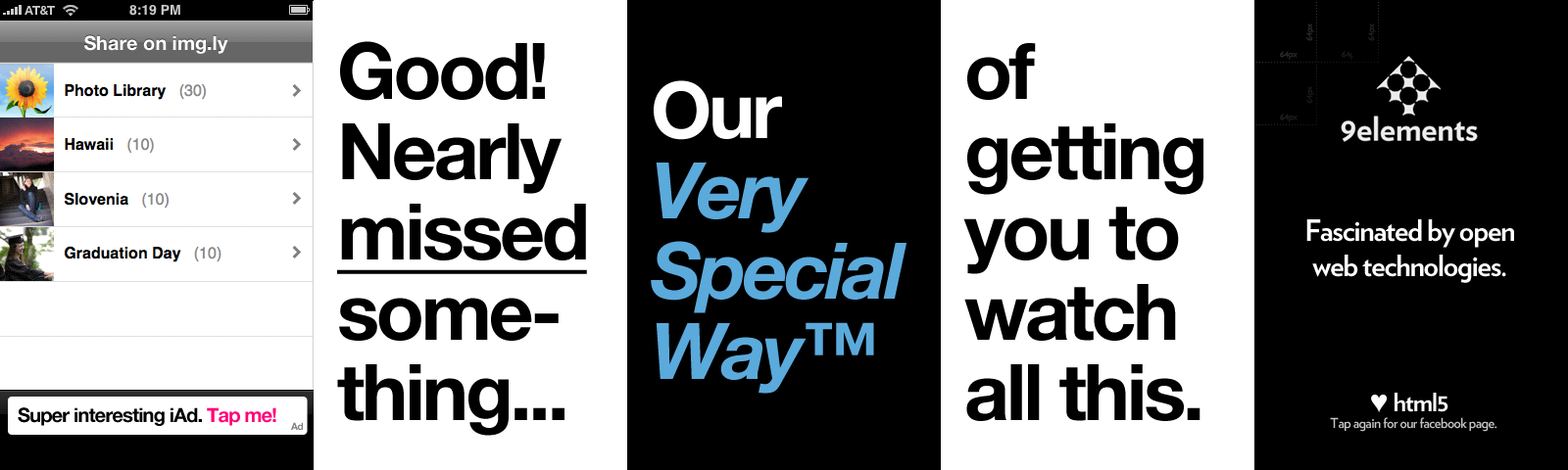
<style>
.page{position:relative;width:1568px;height:470px;background:#ffffff}
.page>*{position:absolute;margin:0}
.t1{font:9.8px "Verlag-Book";letter-spacing:-0.04em;color:#2a2a2a}
.t2{font:9.8px "Verlag-Book";letter-spacing:-0.04em;color:#1f1f1f}
.t3{font:78.4px/80.4px "HelveticaNeue-Bold";letter-spacing:-0.04em;color:#000000}
.t4{font:78.4px/80.4px "HelveticaNeue-Bold";letter-spacing:-0.04em;color:#000000;text-decoration:underline}
.t5{font:9.8px "Verlag-Book";letter-spacing:-0.04em;color:#2c2c2c}
.t6{font:9.8px "Verlag-Book";letter-spacing:-0.04em}
.t7{font:78.4px/80.4px "HelveticaNeue-BoldItalic";letter-spacing:-0.04em;color:#5baadc}
.t8{font:78.4px/80.4px "HelveticaNeue-Bold";letter-spacing:-0.04em;color:#ffffff}
.t9{font:9.8px "Verlag-Book";letter-spacing:-0.04em;color:#181818}
.t10{font:9.8px "Verlag-Book";letter-spacing:-0.04em;color:#202020}
.t11{font:29.4px "Verlag-Bold";letter-spacing:-0.04em;color:#ffffff}
.t12{font:29.4px "Arial-Black";letter-spacing:-0.04em;color:#ffffff}
.t13{font:25.5px "Verlag-Bold";letter-spacing:-0.04em;color:#ffffff}
.t14{font:19.6px "HelveticaNeue-Bold";letter-spacing:-0.04em;color:#000000}
.t15{font:19.6px "HelveticaNeue-Bold";letter-spacing:-0.04em;color:#ff0077}
.t16{font:9.8px "HelveticaNeue-Bold";letter-spacing:-0.04em;color:#7f7f7f}
.t17{font:13.7px "Verlag-Bold";letter-spacing:-0.04em;color:#c2c2c2}
</style>
<div class="page">
<p class="t1" style="left:1305px;top:24px;width:10px;height:17px;rotate:-90deg">64px</p>
<p class="t2" style="left:1367px;top:24px;width:10px;height:17px;rotate:-90deg">64px</p>
<p class="t3" style="left:337px;top:41px;width:250px;height:395px">Good!<br>Nearly<br><span class="t4">missed<br></span>some-<br>thing...</p>
<p class="t3" style="left:963px;top:43px;width:240px;height:378px">of<br>getting<br>you to<br>watch<br>all this.</p>
<p class="t5" style="left:1280px;top:51px;width:18px;height:9px">64px</p>
<p class="t6" style="left:1342px;top:51px;width:17px;height:9px">64px</p>
<p class="t7" style="left:651px;top:80px;width:255px;height:314px"><span class="t8">Our<br></span>Very<br>Special<br>Way™</p>
<p class="t9" style="left:1305px;top:86px;width:10px;height:18px;rotate:-90deg">64px</p>
<p class="t10" style="left:1280px;top:114px;width:18px;height:8px">64px</p>
<p class="t11" style="left:1306px;top:220px;width:208px;height:63px;text-align:center">Fascinated by open<br>web technologies.</p>
<p class="t12" style="left:1371px;top:395px;width:16px;height:19px">♥</p>
<p class="t13" style="left:1395px;top:393px;width:53px;height:20px">html5</p>
<p class="t14" style="left:18px;top:408px;width:258px;height:18px">Super interesting iAd. <span class="t15">Tap me!</span></p>
<p class="t16" style="left:291px;top:422px;width:12px;height:8px">Ad</p>
<p class="t17" style="left:1330px;top:417px;width:167px;height:15px">Tap again for our facebook page.</p>
</div>
